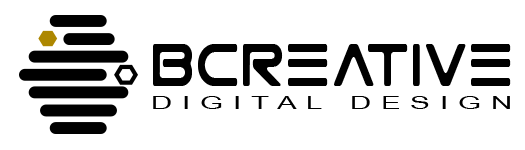
<style>
.page{position:relative;width:525px;height:150px;background:#ffffff}
.page>*{position:absolute;margin:0}
.t1{font:60px "GtekTechnology";letter-spacing:0.08em;color:#000000;scale:0.8 1}
.t2{font:18px "ArialNarrow";letter-spacing:0.275em;color:#000000;text-transform:uppercase;scale:2 1}
</style>
<div class="page">
<p class="t1" style="left:153px;top:44px;width:358px;height:42px">bcreative</p>
<p class="t2" style="left:153px;top:96px;width:357px;height:13px">digital design</p>
</div>
